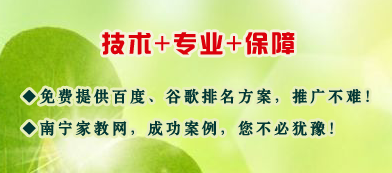
<style>
.page{position:relative;width:392px;height:173px}
.page>*{position:absolute;margin:0}
.t1{font:24px "¹ã½Ý¾ÓÃÔÄã×Ö¿â";letter-spacing:0.1em;color:#db010b}
.t2{font:16px/32px "-G-h-s-n-0-0-m";letter-spacing:0.1em;color:#023734;font-weight:bold}
</style>
<div class="page">
<p class="t1" style="left:102px;top:32px;width:193px;height:23px">技术+专业+保障</p>
<p class="t2" style="left:22px;top:88px;width:347px;height:48px">◆免费提供百度、谷歌排名方案，推广不难！<br>◆南宁家教网，成功案例，您不必犹豫！</p>
</div>
